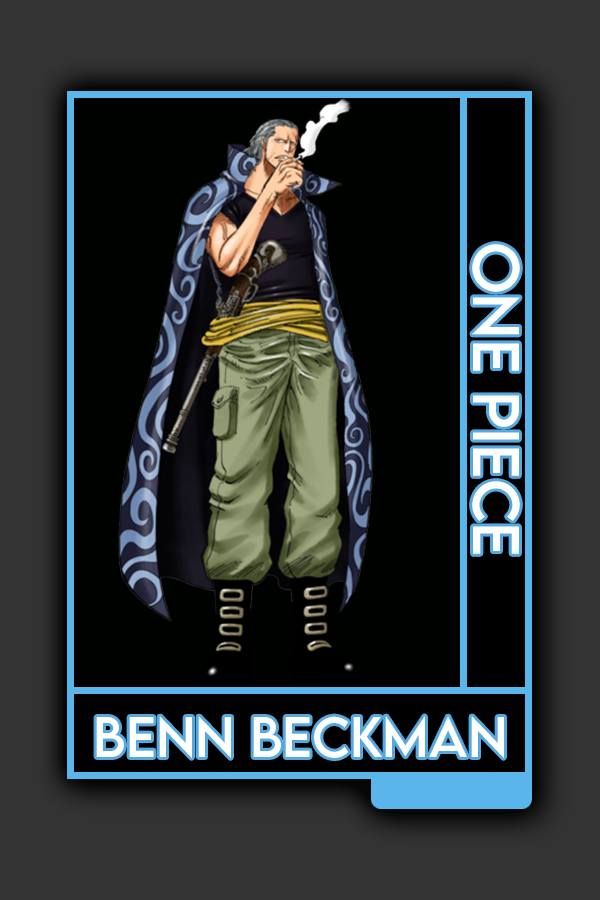
<style>
.page{position:relative;width:600px;height:900px;background:#333333}
.page>*{position:absolute;margin:0}
.t1{font:58.4px "LEMONMILK-Regular";color:#ffffff}
.t2{font:50.5px "LEMONMILK-Regular";color:#ffffff}
</style>
<div class="page">
<p class="t1" style="left:472px;top:244px;width:48px;height:310px;rotate:90deg">One Piece</p>
<p class="t2" style="left:96px;top:716px;width:408px;height:42px">Benn Beckman</p>
</div>
